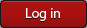
<style>
.page{position:relative;width:87px;height:28px;background:#aa1111}
.page>*{position:absolute;margin:0}
.t1{font:14px "MyriadPro-Regular";color:#ffffff}
</style>
<div class="page">
<p class="t1" style="left:26px;top:8px;width:34px;height:13px">Log in</p>
</div>
